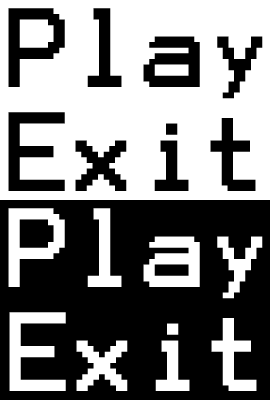
<style>
.page{position:relative;width:270px;height:400px;background:#000000}
.page>*{position:absolute;margin:0}
.t1{font:90px "Terminal";color:#000000}
.t2{font:90px "Terminal";color:#ffffff}
</style>
<div class="page">
<p class="t1" style="left:8px;top:8px;width:255px;height:91px">Play</p>
<p class="t1" style="left:8px;top:112px;width:248px;height:79px">Exit</p>
<p class="t2" style="left:8px;top:208px;width:255px;height:91px">Play</p>
<p class="t2" style="left:9px;top:312px;width:248px;height:79px">Exit</p>
</div>
